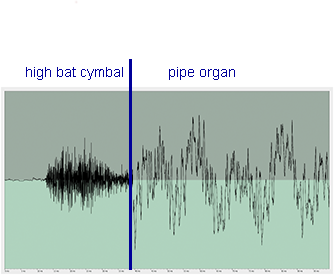
<style>
.page{position:relative;width:335px;height:275px;background:#ffffff}
.page>*{position:absolute;margin:0}
.t1{font:24px "ArialMT";color:#000099}
</style>
<div class="page">
<p class="t1" style="left:26px;top:67px;width:97px;height:13px">high bat cymbal</p>
<p class="t1" style="left:169px;top:67px;width:66px;height:13px">pipe organ</p>
</div>
